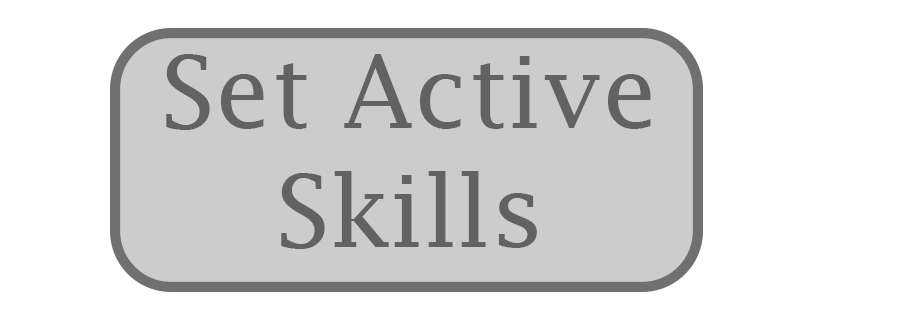
<style>
.page{position:relative;width:909px;height:319px;background:#ffffff}
.page>*{position:absolute;margin:0}
.t1{font:99.5px "LucidaFax";color:#636161}
</style>
<div class="page">
<p class="t1" style="left:166px;top:54px;width:485px;height:195px;text-align:center">Set Active Skills</p>
</div>
